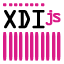
<style>
.page{position:relative;width:64px;height:64px;background:#ffffff}
.page>*{position:absolute;margin:0}
.t1{font:13.8px "OCRAStd";letter-spacing:-0.357em;color:#da1b87;font-weight:bold}
.t2{font:23px "OCRAStd";letter-spacing:-0.12em;color:#000000;font-weight:bold}
.t3{font:15.7px "OCRAStd";letter-spacing:-0.24em;color:#da1b87;font-weight:bold}
.t4{font:144.5px "OCRAStd";letter-spacing:-0.357em;color:#da1b87;font-weight:bold;scale:0.1 1}
</style>
<div class="page">
<p class="t1" style="left:3px;top:3px;width:42px;height:4px">........</p>
<p class="t2" style="left:4px;top:10px;width:41px;height:19px">XDI</p>
<p class="t3" style="left:45px;top:10px;width:16px;height:16px">js</p>
<p class="t4" style="left:3px;top:32px;width:58px;height:29px">...........</p>
</div>
